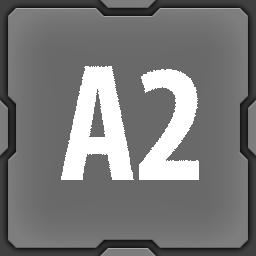
<style>
.page{position:relative;width:256px;height:256px;background:#696969}
.page>*{position:absolute;margin:0}
.t1{font:168.3px "MyriadPro-BoldCond";color:#ffffff}
</style>
<div class="page">
<p class="t1" style="left:60px;top:66px;width:139px;height:114px">A2</p>
</div>
